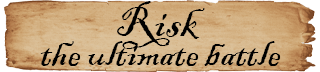
<style>
.page{position:relative;width:320px;height:72px}
.page>*{position:absolute;margin:0}
.t1{font:45.8px "BlackadderITC-Regular";color:#000000}
.t2{font:41.5px "BlackadderITC-Regular";color:#000000}
</style>
<div class="page">
<p class="t1" style="left:117px;top:1px;width:88px;height:48px">Risk</p>
<p class="t2" style="left:40px;top:41px;width:241px;height:25px">the ultimate battle</p>
</div>
